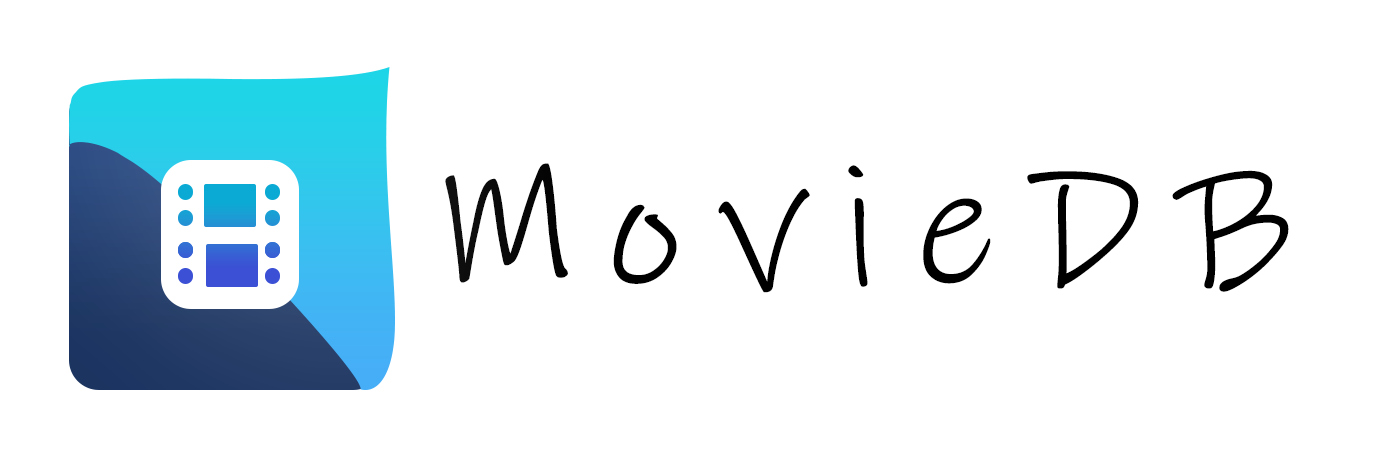
<style>
.page{position:relative;width:1380px;height:460px;background:#ffffff}
.page>*{position:absolute;margin:0}
.t1{font:172.5px "InkFree";letter-spacing:0.2em;color:#000000}
</style>
<div class="page">
<p class="t1" style="left:445px;top:163px;width:844px;height:130px">MovieDB</p>
</div>
